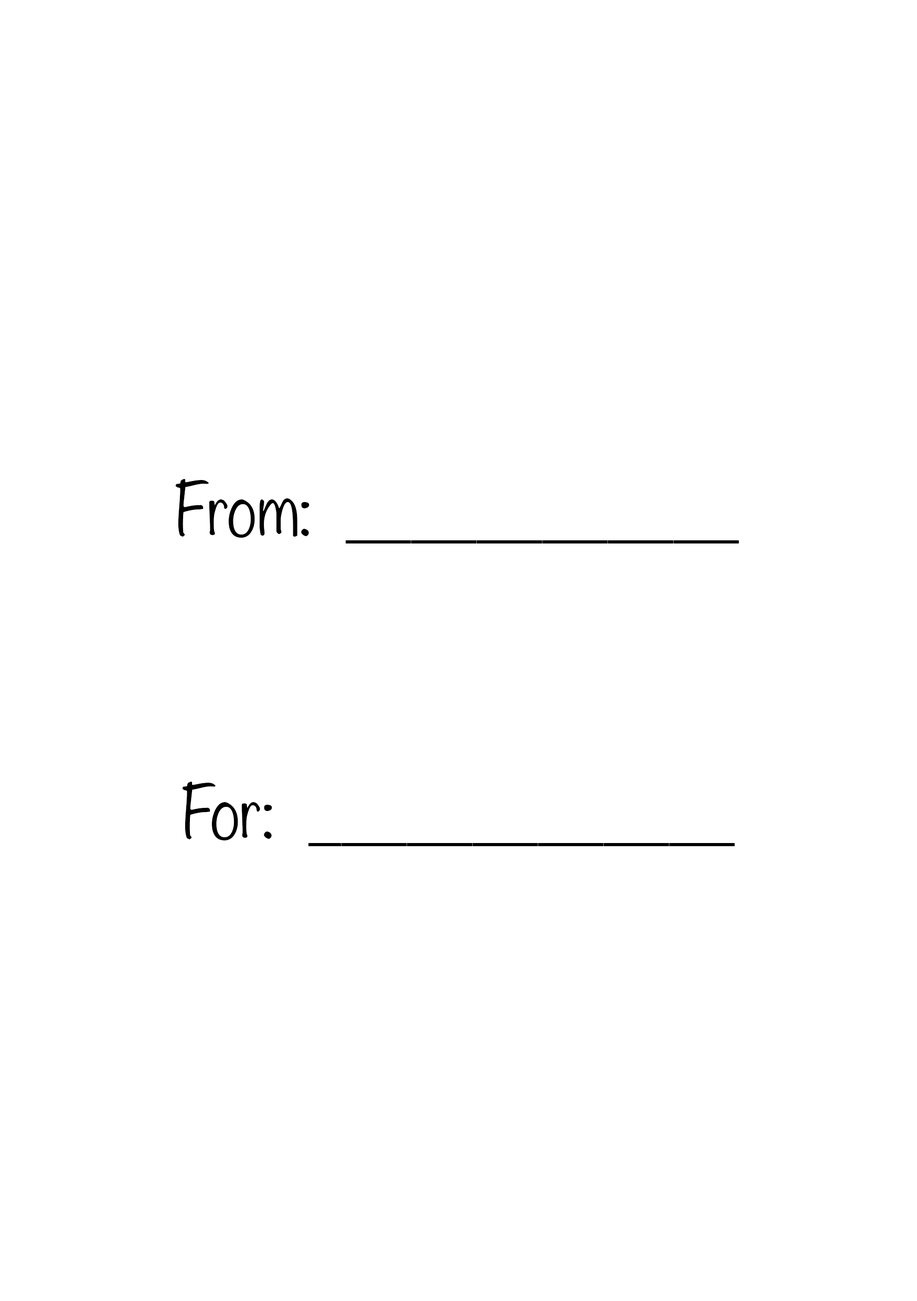
<style>
.page{position:relative;width:917px;height:1301px;background:#ffffff}
.page>*{position:absolute;margin:0}
.t1{font:65.6px "Helvetica-Light";color:#000000}
.t2{font:65.6px "Noteworthy-Light";color:#000000}
</style>
<div class="page">
<p class="t1" style="left:175px;top:479px;width:564px;height:64px"><span class="t2">From:  </span>____________</p>
<p class="t1" style="left:182px;top:781px;width:553px;height:65px"><span class="t2">For:  </span>_____________</p>
</div>
